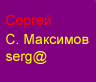
<style>
.page{position:relative;width:96px;height:82px;background:#800080}
.page>*{position:absolute;margin:0}
.t1{font:14px "ArialMT";color:#ff0000}
.t2{font:14px "ArialMT";color:#ffff00}
</style>
<div class="page">
<p class="t1" style="left:6px;top:14px;width:45px;height:14px">Сергей</p>
<p class="t2" style="left:6px;top:33px;width:83px;height:31px">С. Максимов<br>serg@</p>
</div>
